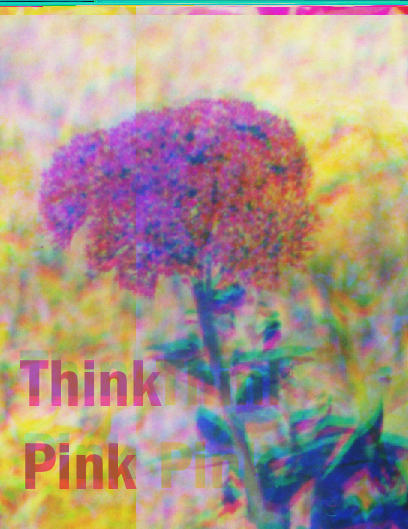
<style>
.page{position:relative;width:408px;height:529px}
.page>*{position:absolute;margin:0}
.t1{font:68.8px "FranklinGothic-DemiCond"}
</style>
<div class="page">
<p class="t1" style="left:20px;top:345px;width:142px;height:129px">Think<br>Pink</p>
</div>
